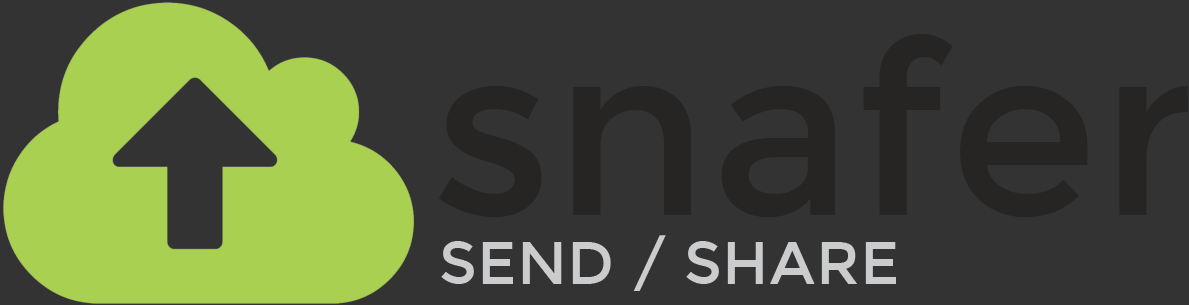
<style>
.page{position:relative;width:1189px;height:305px;background:#333333}
.page>*{position:absolute;margin:0}
.t1{font:240px "Montserrat-Regular";letter-spacing:0.01em;color:#262524}
.t2{font:60px "Montserrat-Regular";letter-spacing:0.01em;color:#cbccce}
</style>
<div class="page">
<p class="t1" style="left:438px;top:34px;width:750px;height:183px">snafer</p>
<p class="t2" style="left:441px;top:235px;width:455px;height:56px">SEND / SHARE</p>
</div>
